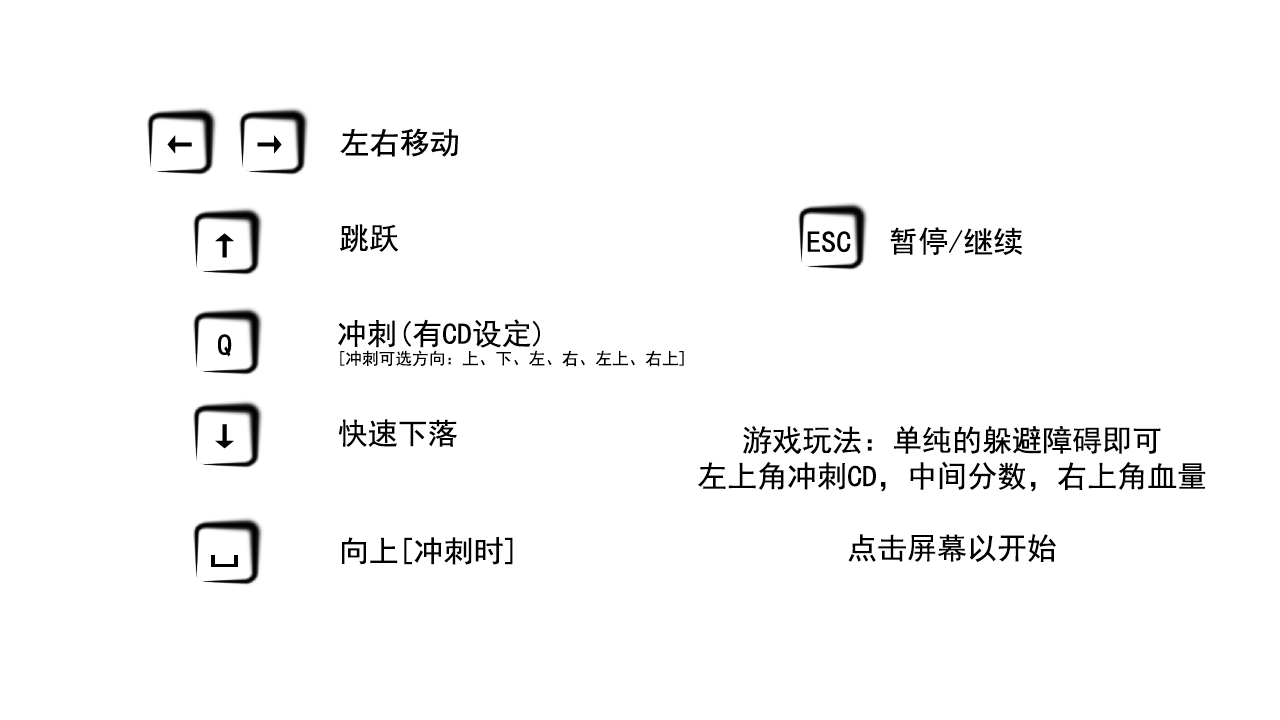
<style>
.page{position:relative;width:1280px;height:720px;background:#ffffff}
.page>*{position:absolute;margin:0}
.t1{font:30px "SimHei";color:#000000}
.t2{font:16.7px "SimHei";color:#000000}
</style>
<div class="page">
<p class="t1" style="left:340px;top:224px;width:59px;height:28px">跳跃</p>
<p class="t1" style="left:890px;top:227px;width:132px;height:29px">暂停/继续</p>
<p class="t2" style="left:338px;top:319px;width:346px;height:48px"><span class="t1">冲刺(有CD设定)<br></span>[冲刺可选方向：上、下、左、右、左上、右上]</p>
<p class="t1" style="left:338px;top:419px;width:119px;height:28px">快速下落</p>
<p class="t1" style="left:698px;top:425px;width:508px;height:137px;text-align:center">游戏玩法：单纯的躲避障碍即可<br>左上角冲刺CD，中间分数，右上角血量<br><br>点击屏幕以开始</p>
<p class="t1" style="left:342px;top:537px;width:171px;height:28px">向上[冲刺时]</p>
</div>
